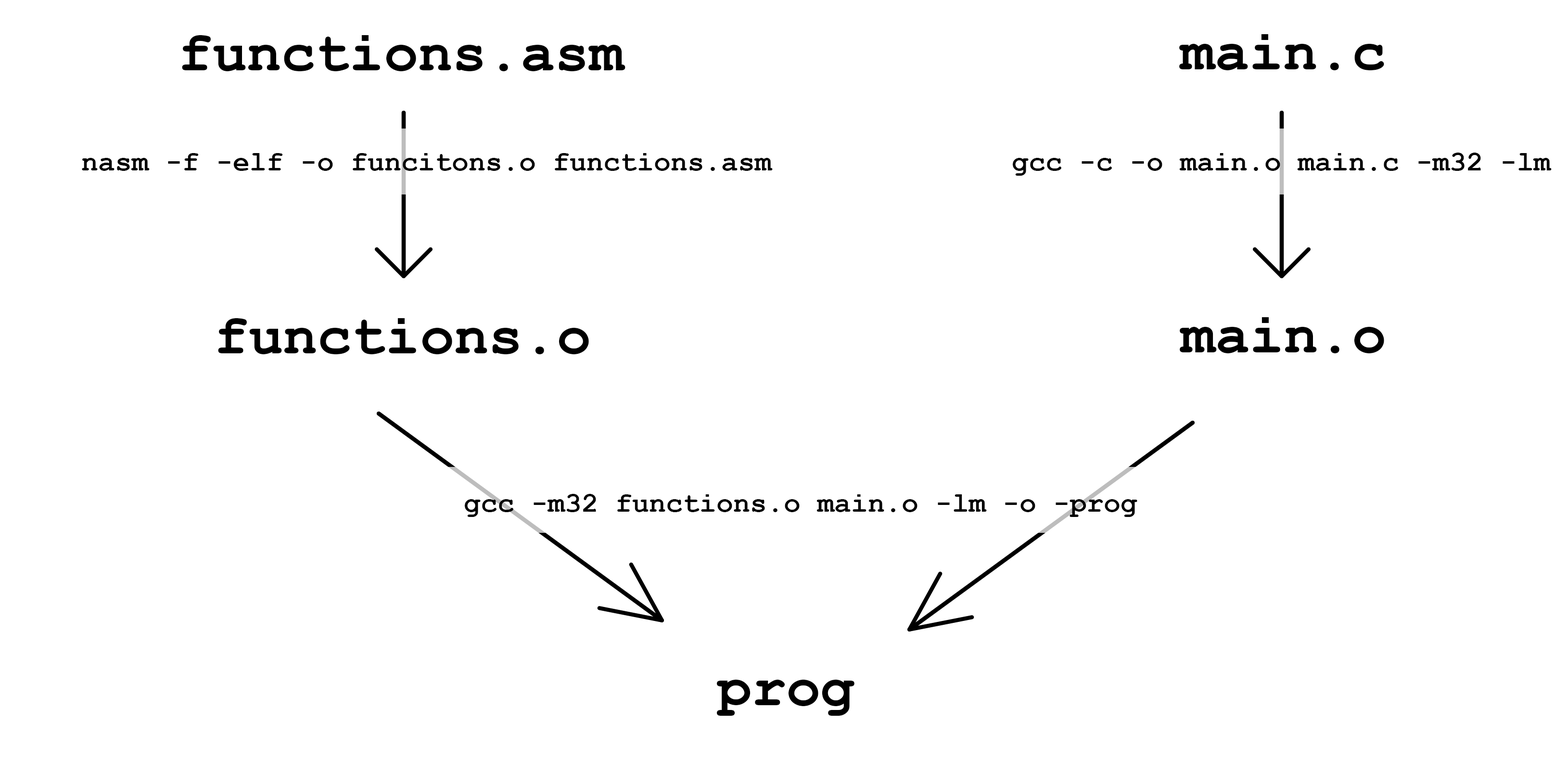
<style>
.page{position:relative;width:1567px;height:761px;background:#ffffff}
.page>*{position:absolute;margin:0}
.t1{font:57.1px "CourierNewPS-BoldMT";color:#000000}
.t2{font:28.1px "CourierNewPS-BoldMT";color:#000000}
</style>
<div class="page">
<p class="t1" style="left:182px;top:35px;width:444px;height:36px">functions.asm</p>
<p class="t1" style="left:1179px;top:34px;width:205px;height:36px">main.c</p>
<p class="t2" style="left:82px;top:153px;width:691px;height:18px">nasm -f -elf -o funcitons.o functions.asm</p>
<p class="t2" style="left:1013px;top:153px;width:539px;height:23px">gcc -c -o main.o main.c -m32 -lm</p>
<p class="t1" style="left:1180px;top:317px;width:204px;height:36px">main.o</p>
<p class="t1" style="left:218px;top:318px;width:371px;height:36px">functions.o</p>
<p class="t2" style="left:465px;top:494px;width:673px;height:23px">gcc -m32 functions.o main.o -lm -o -prog</p>
<p class="t1" style="left:717px;top:679px;width:138px;height:37px">prog</p>
</div>
